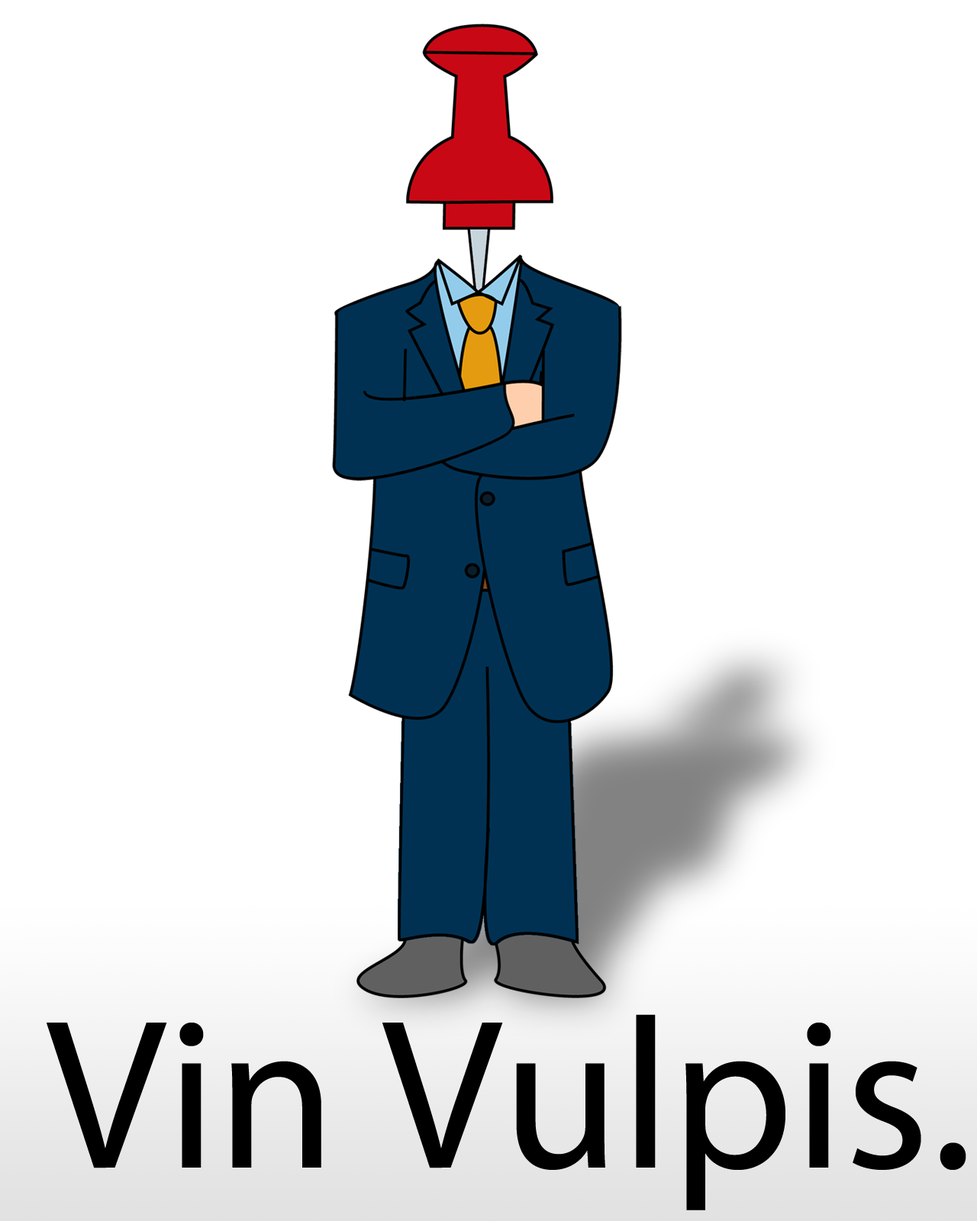
<style>
.page{position:relative;width:977px;height:1221px;background:#ffffff}
.page>*{position:absolute;margin:0}
.t1{font:215.2px "MyriadPro-Regular";color:#000000}
</style>
<div class="page">
<p class="t1" style="left:47px;top:1014px;width:919px;height:196px">Vin Vulpis.</p>
</div>
